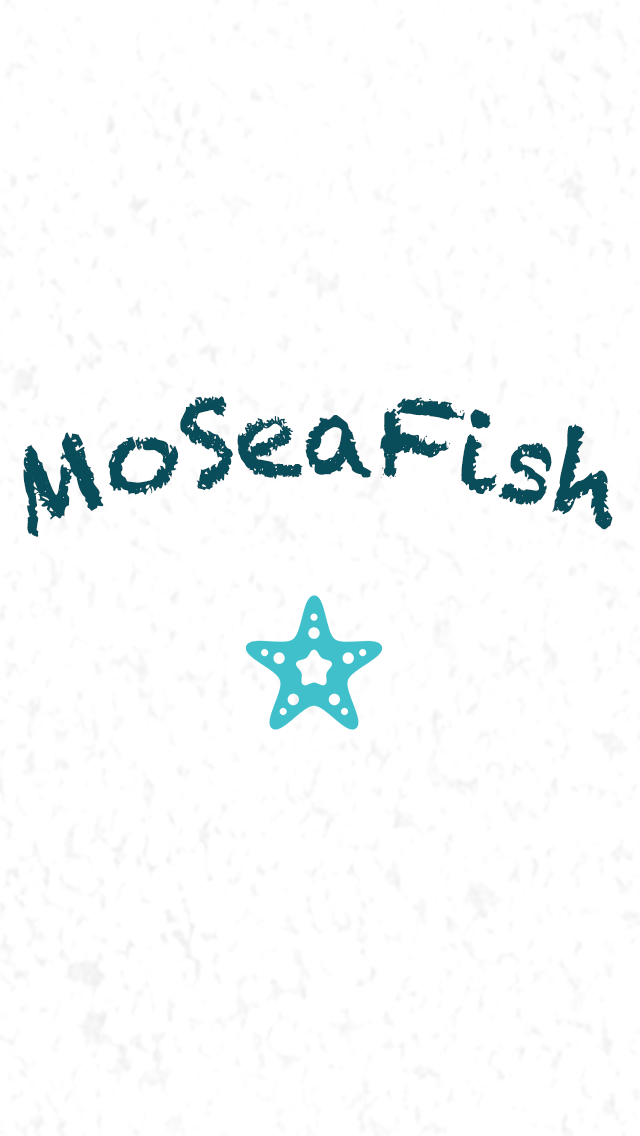
<style>
.page{position:relative;width:640px;height:1136px;background:#ffffff}
.page>*{position:absolute;margin:0}
.t1{font:113.6px "Chalkduster";color:#084d59;scale:0.85 1}
</style>
<div class="page">
<p class="t1" style="left:23px;top:396px;width:590px;height:141px">MoSeaFish</p>
</div>
